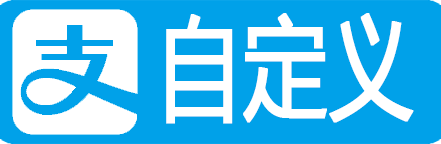
<style>
.page{position:relative;width:441px;height:144px;background:#00a1e9}
.page>*{position:absolute;margin:0}
.t1{font:112.2px "MicrosoftYaHei";color:#ffffff;font-weight:bold;scale:0.75 1}
</style>
<div class="page">
<p class="t1" style="left:166px;top:13px;width:248px;height:111px">自定义</p>
</div>
